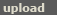
<style>
.page{position:relative;width:57px;height:15px;background:#5a5a5a}
.page>*{position:absolute;margin:0}
.t1{font:11px "Verdana-Bold";color:#dedbcb}
</style>
<div class="page">
<p class="t1" style="left:3px;top:3px;width:42px;height:11px">upload</p>
</div>
